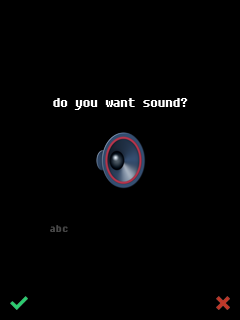
<style>
.page{position:relative;width:240px;height:320px;background:#000000}
.page>*{position:absolute;margin:0}
.t1{font:12px "Fixedsys";color:#ffffff}
.t2{font:10px "Fixedsys";color:#494949}
</style>
<div class="page">
<p class="t1" style="left:53px;top:98px;width:135px;height:12px">do you want sound?</p>
<p class="t2" style="left:50px;top:225px;width:18px;height:7px">abc</p>
</div>
